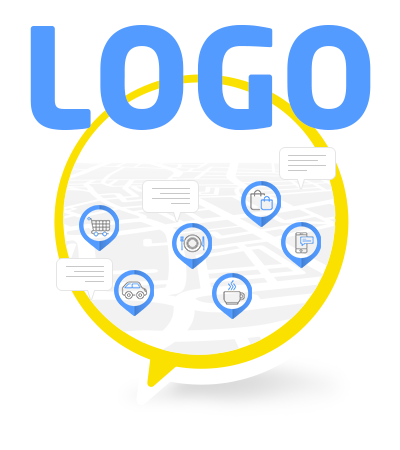
<style>
.page{position:relative;width:400px;height:450px;background:#ffffff}
.page>*{position:absolute;margin:0}
.t1{font:138.3px "NeoSans-Bold";color:#539bff;text-transform:uppercase}
</style>
<div class="page">
<p class="t1" style="left:30px;top:25px;width:341px;height:105px">logo</p>
</div>
